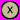
<style>
.page{position:relative;width:20px;height:20px;background:#c3bc97}
.page>*{position:absolute;margin:0}
.t1{font:13.1px "CascadiaCode-Regular";color:#000000}
</style>
<div class="page">
<p class="t1" style="left:7px;top:6px;width:6px;height:8px">x</p>
</div>
